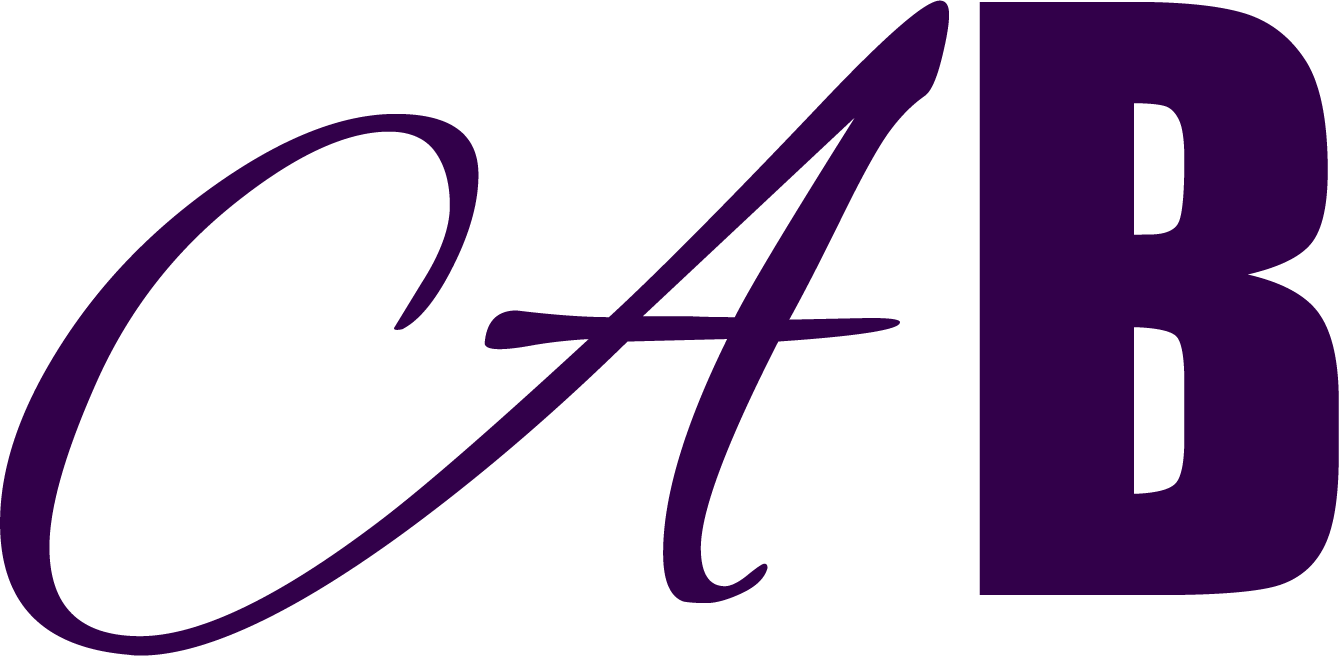
<style>
.page{position:relative;width:1339px;height:656px;background:#ffffff}
.page>*{position:absolute;margin:0}
.t1{font:833.3px "AlexBrush-Regular";color:#32004a}
.t2{font:750px "Impact";color:#32004a}
</style>
<div class="page">
<p class="t1" style="left:0px;top:0px;width:949px;height:656px">A</p>
<p class="t2" style="left:979px;top:2px;width:360px;height:593px">B</p>
</div>
